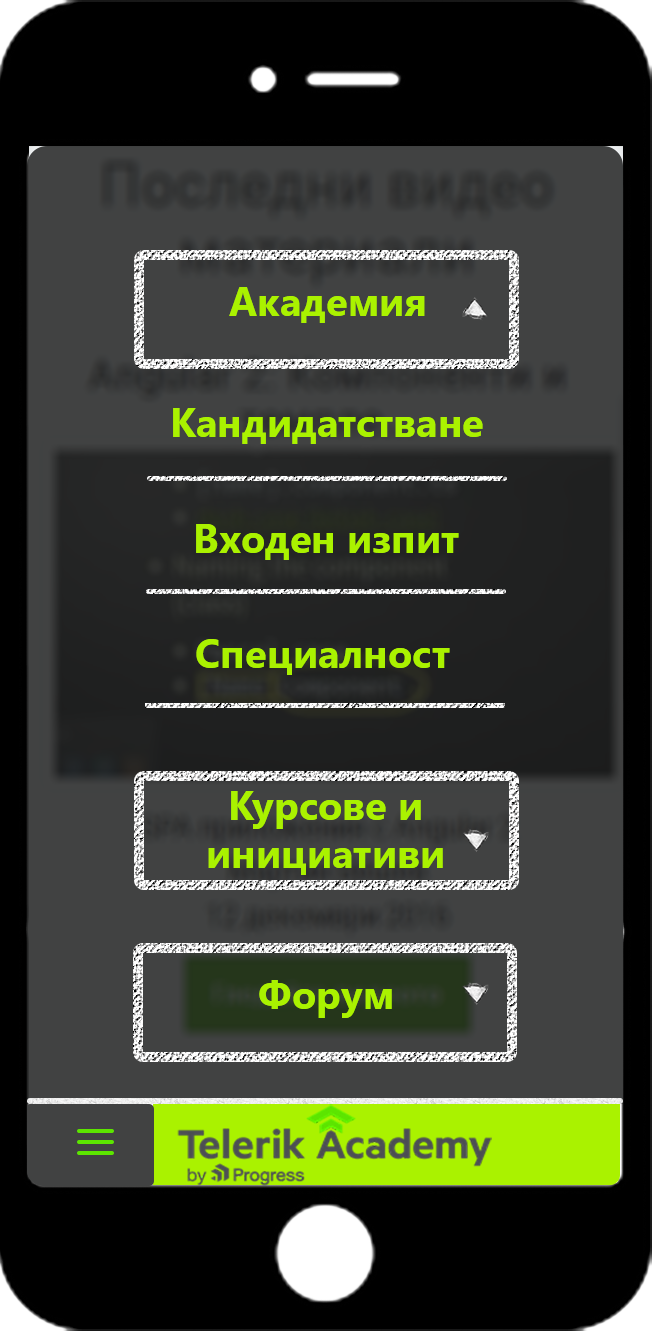
<style>
.page{position:relative;width:652px;height:1331px;background:#000000}
.page>*{position:absolute;margin:0}
.t1{font:40px "SegoeUI-Bold";color:#aaf200}
</style>
<div class="page">
<p class="t1" style="left:229px;top:287px;width:196px;height:36px">Академия</p>
<p class="t1" style="left:173px;top:408px;width:310px;height:36px">Кандидатстване</p>
<p class="t1" style="left:196px;top:524px;width:263px;height:36px">Входен изпит</p>
<p class="t1" style="left:196px;top:639px;width:254px;height:36px">Специалност</p>
<p class="t1" style="left:208px;top:791px;width:235px;height:84px;text-align:center">Курсове и инициативи</p>
<p class="t1" style="left:259px;top:980px;width:133px;height:38px">Форум</p>
</div>
